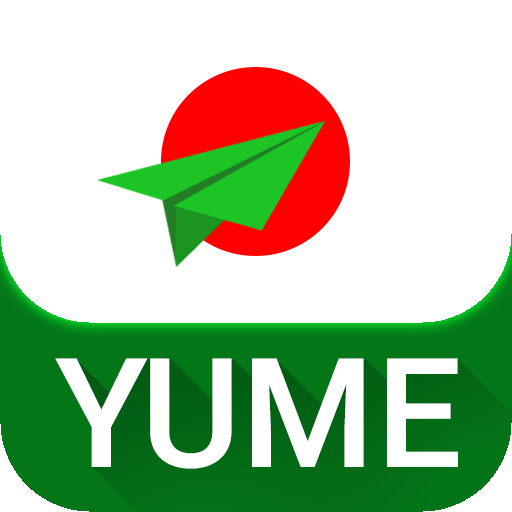
<style>
.page{position:relative;width:512px;height:512px;background:#ffffff}
.page>*{position:absolute;margin:0}
.t1{font:152.5px "Roboto-Medium";letter-spacing:0.005em;color:#ffffff}
</style>
<div class="page">
<p class="t1" style="left:55px;top:358px;width:403px;height:111px">YUME</p>
</div>
